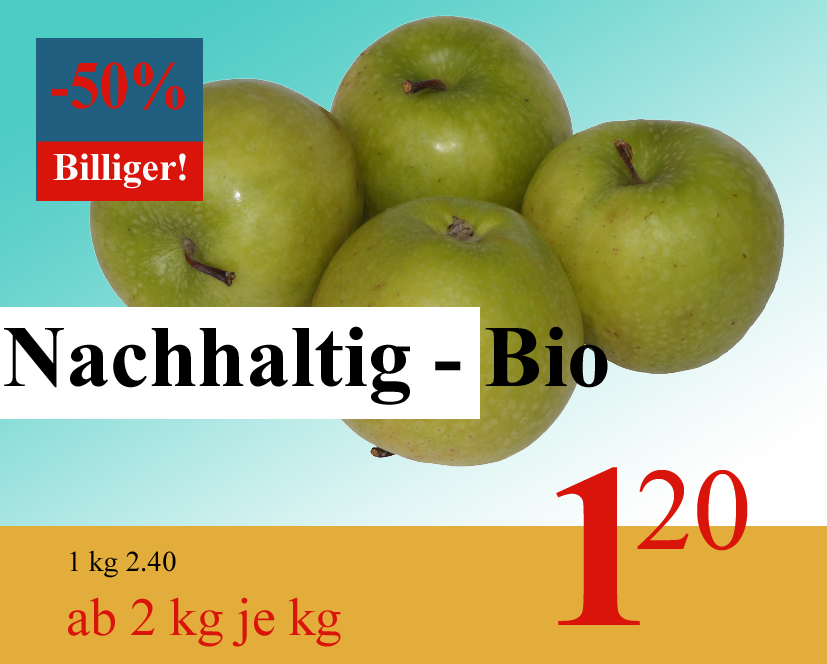
<style>
.page{position:relative;width:827px;height:664px}
.page>*{position:absolute;margin:0}
.t1{font:68.1px "TimesNewRomanPS-BoldMT";color:#d9140a;scale:0.87 1}
.t2{font:38.9px "TimesNewRomanPS-BoldMT";color:#fdfdfd}
.t3{font:87.5px "TimesNewRomanPS-BoldMT";color:#010000}
.t4{font:233.3px "TimesNewRomanPS-BoldMT";color:#d9140a}
.t5{font:53.5px "TimesNewRomanPSMT";color:#d9140a}
.t6{font:116.7px "TimesNewRomanPSMT";color:#d9140a}
.t7{font:29.2px "TimesNewRomanPSMT";color:#010000}
</style>
<div class="page">
<p class="t1" style="left:51px;top:62px;width:134px;height:48px">-50%</p>
<p class="t2" style="left:53px;top:153px;width:133px;height:36px">Billiger!</p>
<p class="t3" style="left:4px;top:326px;width:604px;height:79px">Nachhaltig - Bio</p>
<p class="t4" style="left:556px;top:467px;width:84px;height:158px"><span class="t5">              </span>1</p>
<p class="t6" style="left:637px;top:470px;width:111px;height:81px">20</p>
<p class="t7" style="left:70px;top:550px;width:106px;height:28px">1 kg 2.40</p>
<p class="t5" style="left:68px;top:597px;width:273px;height:50px">ab 2 kg je kg</p>
</div>
